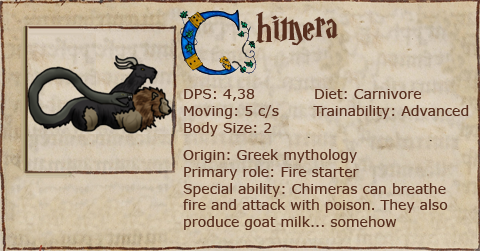
<style>
.page{position:relative;width:480px;height:251px}
.page>*{position:absolute;margin:0}
.t1{font:47px "MagicSchoolOne";color:#572f1f}
.t2{font:14px "Verdana";color:#572f1f}
</style>
<div class="page">
<p class="t1" style="left:256px;top:11px;width:82px;height:35px">himera</p>
<p class="t2" style="left:184px;top:89px;width:285px;height:47px">DPS: 4,38            Diet: Carnivore<br>Moving: 5 c/s       Trainability: Advanced<br>Body Size: 2</p>
<p class="t2" style="left:183px;top:149px;width:265px;height:81px">Origin: Greek mythology<br>Primary role: Fire starter<br>Special ability: Chimeras can breathe <br>fire and attack with poison. They also<br>produce goat milk... somehow</p>
</div>
